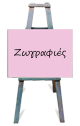
<style>
.page{position:relative;width:80px;height:126px;background:#ffffff}
.page>*{position:absolute;margin:0}
.t1{font:9.6px "SegoeScript"}
</style>
<div class="page">
<p class="t1" style="left:14px;top:48px;width:52px;height:11px">Ζωγραφιές</p>
</div>
